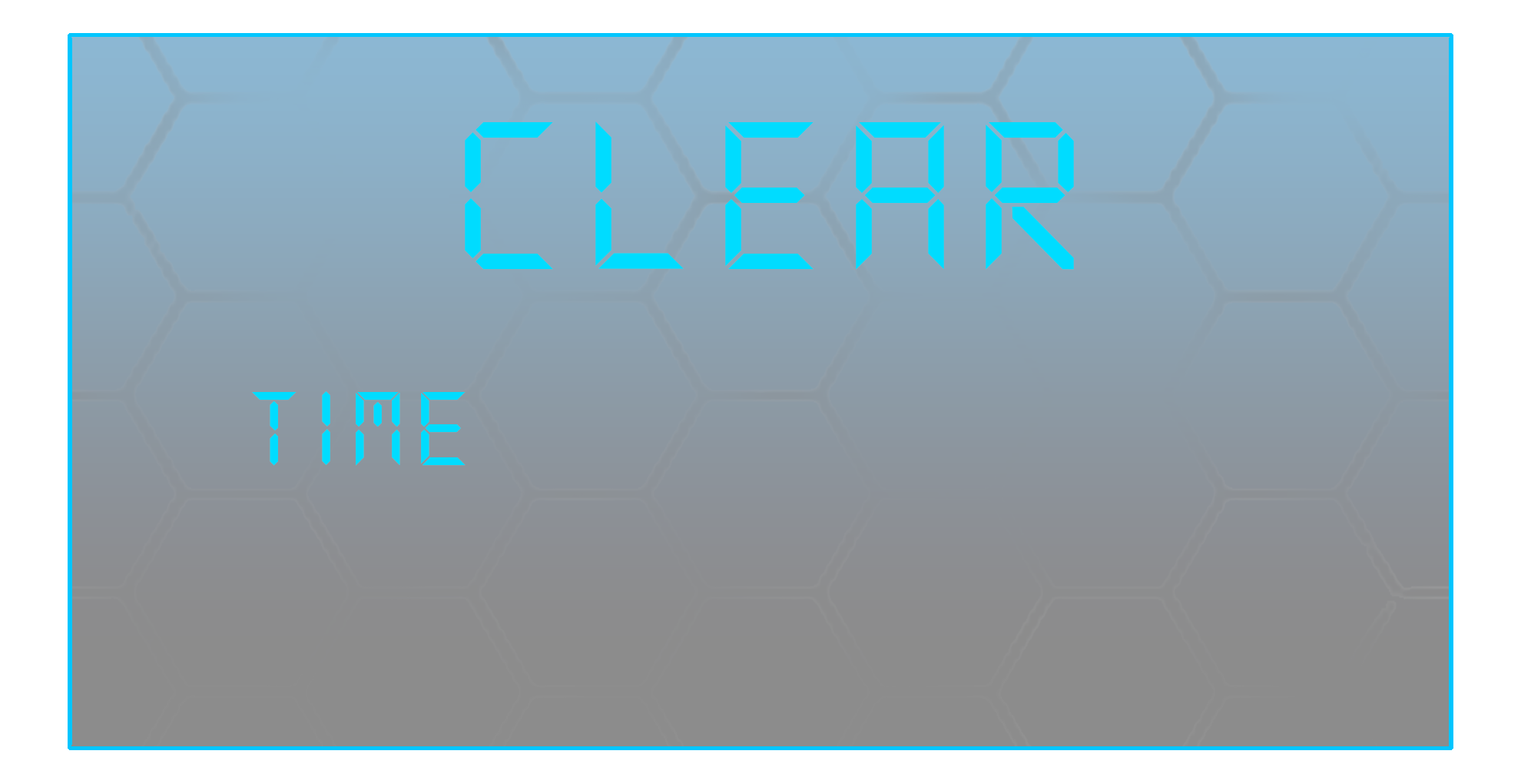
<style>
.page{position:relative;width:1521px;height:784px}
.page>*{position:absolute;margin:0}
.t1{font:230.5px "DS-Digital";letter-spacing:0.075em;color:#00dcff}
.t2{font:115.3px "DS-Digital";letter-spacing:0.075em;color:#00dcff}
</style>
<div class="page">
<p class="t1" style="left:465px;top:121px;width:609px;height:149px">CLEAR</p>
<p class="t2" style="left:252px;top:391px;width:214px;height:75px">time</p>
</div>
